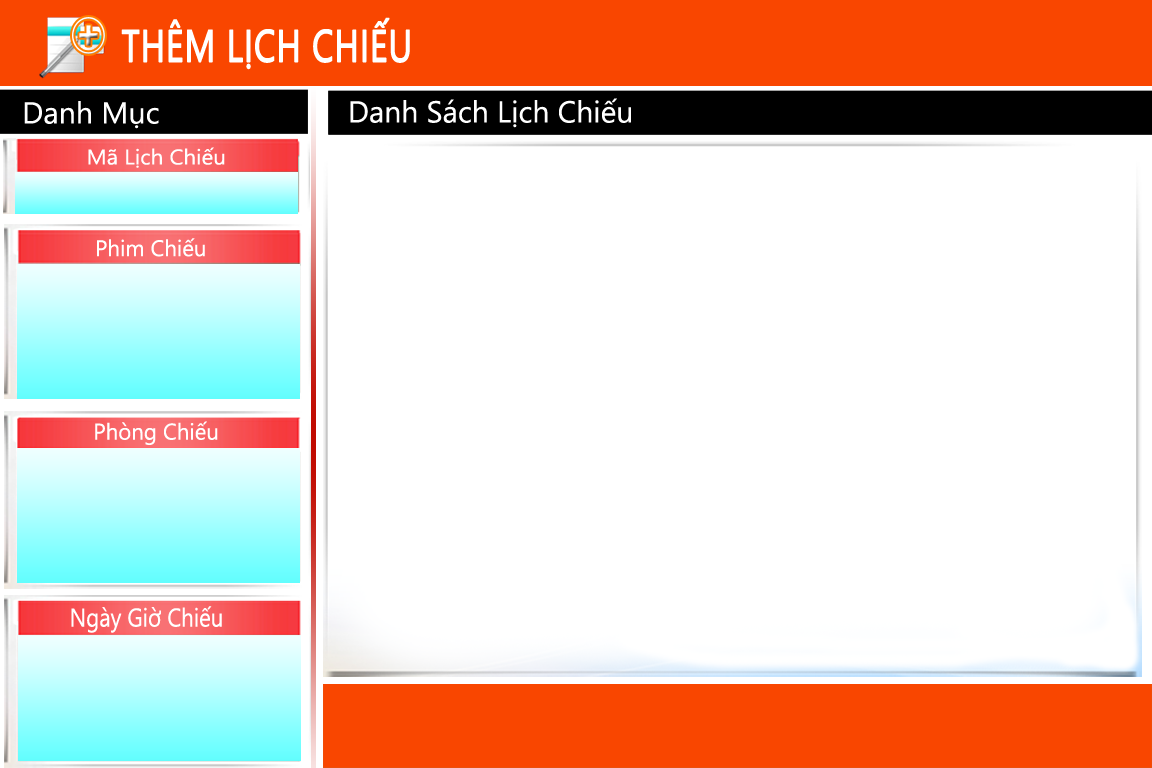
<style>
.page{position:relative;width:1152px;height:768px;background:#ffffff}
.page>*{position:absolute;margin:0}
.t1{font:45px "SegoeUI";color:#ffffff;text-transform:uppercase;font-weight:bold;scale:0.77 1}
.t2{font:30.3px "SegoeUI";color:#ffffff}
.t3{font:21.3px "SegoeUI";color:#ffffff;scale:1.06 1}
.t4{font:22.5px "SegoeUI";color:#ffffff}
.t5{font:22.6px "SegoeUI";color:#ffffff}
.t6{font:25.6px "SegoeUI";color:#ffffff;scale:0.87 1}
</style>
<div class="page">
<p class="t1" style="left:121px;top:17px;width:289px;height:53px">THÊM Lịch Chiếu</p>
<p class="t2" style="left:24px;top:101px;width:135px;height:28px">Danh Mục</p>
<p class="t2" style="left:350px;top:98px;width:281px;height:30px">Danh Sách Lịch Chiếu</p>
<p class="t3" style="left:88px;top:147px;width:137px;height:21px">Mã Lịch Chiếu</p>
<p class="t4" style="left:97px;top:238px;width:108px;height:19px">Phim Chiếu</p>
<p class="t5" style="left:95px;top:421px;width:123px;height:24px">Phòng Chiếu</p>
<p class="t6" style="left:71px;top:606px;width:151px;height:27px">Ngày Giờ Chiếu</p>
</div>
